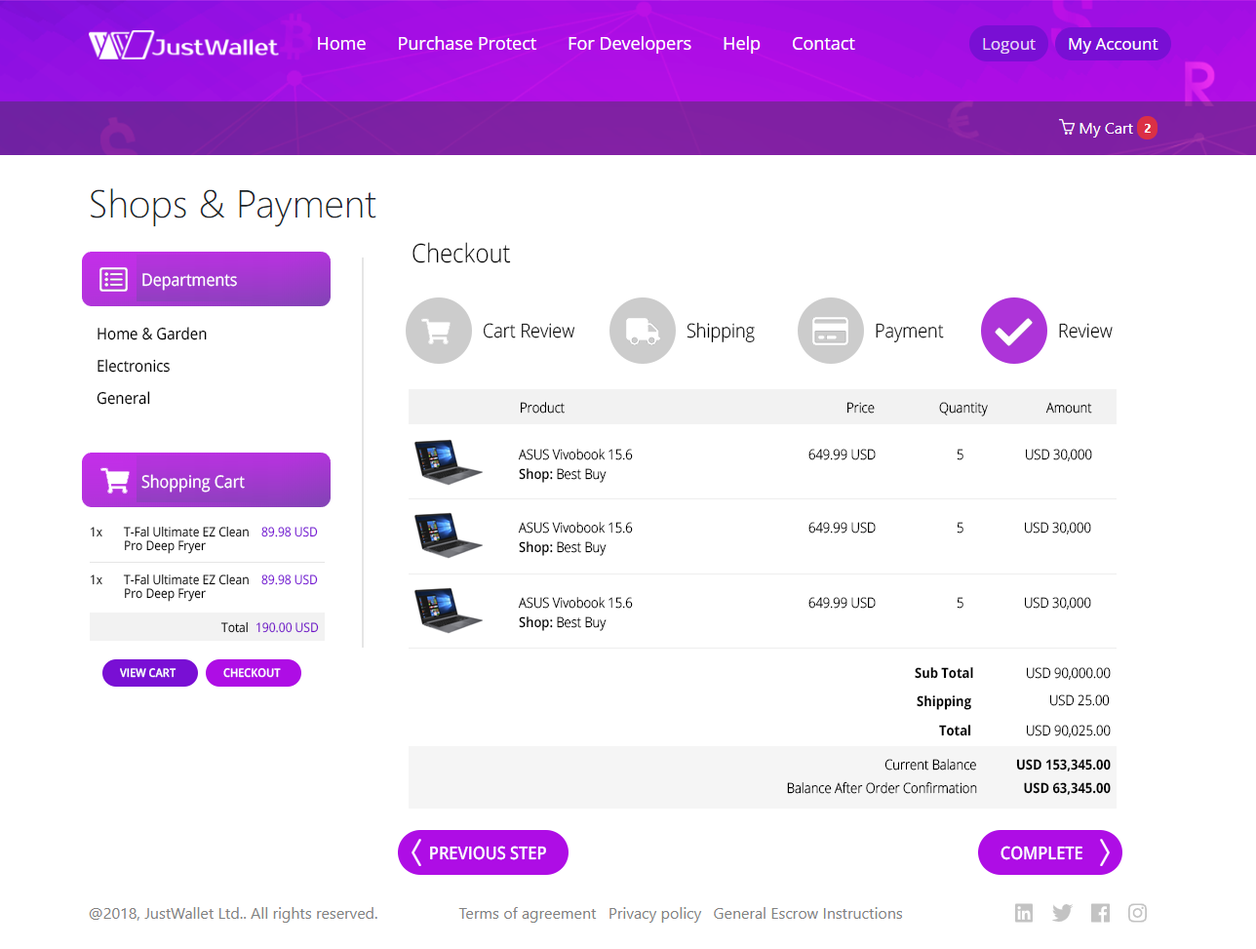
<style>
.page{position:relative;width:1256px;height:949px;background:#ffffff}
.page>*{position:absolute;margin:0}
.t1{font:25.8px "OpenSans-Light";color:#000000;scale:0.91 1}
.t2{font:17.2px "OpenSans";color:#ffffff;scale:0.91 1}
.t3{font:16.1px/32.2px "OpenSans";color:#000000;scale:0.91 1}
.t4{font:19.3px "OpenSans-Light";color:#000000;scale:0.91 1}
.t5{font:13.9px "OpenSans-Light";color:#000000;scale:0.91 1}
.t6{font:13.9px "OpenSans-Semibold";color:#000000;scale:0.91 1}
.t7{font:12.9px "OpenSans";scale:0.91 1}
.t8{font:12.9px "OpenSans";color:#000000;scale:0.91 1}
.t9{font:12.9px "OpenSans";color:#790fd4;scale:0.91 1}
.t10{font:12.9px "OpenSans";color:#730ec9;scale:0.91 1}
.t11{font:11.8px "OpenSans-Semibold";color:#ffffff;text-transform:uppercase;scale:0.91 1}
.t12{font:13.9px "OpenSans-Bold";color:#000000;scale:0.91 1}
.t13{font:13.9px/23.4px "OpenSans-Light";color:#000000;scale:0.91 1}
.t14{font:13.9px/23.4px "OpenSans-Bold";color:#000000;scale:0.91 1}
.t15{font:17.7px "OpenSans-Semibold";color:#ffffff;text-transform:uppercase;scale:0.9 1}
</style>
<div class="page">
<p class="t1" style="left:413px;top:242px;width:98px;height:21px">Checkout</p>
<p class="t2" style="left:142px;top:273px;width:95px;height:18px">Departments</p>
<p class="t3" style="left:97px;top:327px;width:110px;height:78px">Home &amp; Garden<br>Electronics<br>General</p>
<p class="t4" style="left:484px;top:323px;width:92px;height:15px">Cart Review</p>
<p class="t4" style="left:687px;top:322px;width:68px;height:20px">Shipping</p>
<p class="t4" style="left:876px;top:323px;width:68px;height:19px">Payment</p>
<p class="t4" style="left:1059px;top:323px;width:54px;height:15px">Review</p>
<p class="t5" style="left:521px;top:402px;width:44px;height:12px">Product</p>
<p class="t5" style="left:848px;top:402px;width:27px;height:12px">Price</p>
<p class="t5" style="left:939px;top:402px;width:49px;height:15px">Quantity</p>
<p class="t5" style="left:1046px;top:402px;width:46px;height:12px">Amount</p>
<p class="t5" style="left:518px;top:449px;width:115px;height:11px">ASUS Vivobook 15.6</p>
<p class="t5" style="left:809px;top:449px;width:67px;height:11px">649.99 USD</p>
<p class="t5" style="left:957px;top:449px;width:7px;height:11px">5</p>
<p class="t5" style="left:1026px;top:449px;width:66px;height:12px">USD 30,000</p>
<p class="t5" style="left:519px;top:468px;width:88px;height:15px"><span class="t6">Shop: </span>Best Buy</p>
<p class="t2" style="left:141px;top:474px;width:104px;height:19px">Shopping Cart</p>
<p class="t5" style="left:518px;top:522px;width:115px;height:12px">ASUS Vivobook 15.6</p>
<p class="t5" style="left:809px;top:522px;width:67px;height:12px">649.99 USD</p>
<p class="t5" style="left:957px;top:522px;width:7px;height:12px">5</p>
<p class="t5" style="left:1025px;top:522px;width:67px;height:13px">USD 30,000</p>
<p class="t7" style="left:91px;top:527px;width:11px;height:10px">1x</p>
<p class="t8" style="left:123px;top:526px;width:126px;height:28px">T-Fal Ultimate EZ Clean <br>Pro Deep Fryer</p>
<p class="t9" style="left:261px;top:527px;width:57px;height:10px">89.98 USD</p>
<p class="t5" style="left:519px;top:541px;width:88px;height:15px"><span class="t6">Shop: </span>Best Buy</p>
<p class="t7" style="left:91px;top:575px;width:11px;height:10px">1x</p>
<p class="t8" style="left:123px;top:574px;width:126px;height:28px">T-Fal Ultimate EZ Clean <br>Pro Deep Fryer</p>
<p class="t9" style="left:261px;top:575px;width:57px;height:10px">89.98 USD</p>
<p class="t5" style="left:518px;top:597px;width:115px;height:12px">ASUS Vivobook 15.6</p>
<p class="t5" style="left:809px;top:597px;width:67px;height:12px">649.99 USD</p>
<p class="t5" style="left:957px;top:597px;width:7px;height:12px">5</p>
<p class="t5" style="left:1025px;top:597px;width:67px;height:13px">USD 30,000</p>
<p class="t5" style="left:519px;top:616px;width:88px;height:15px"><span class="t6">Shop: </span>Best Buy</p>
<p class="t8" style="left:220px;top:621px;width:28px;height:12px">Total</p>
<p class="t10" style="left:257px;top:622px;width:62px;height:11px">190.00 USD</p>
<p class="t11" style="left:120px;top:668px;width:57px;height:10px">View Cart</p>
<p class="t11" style="left:223px;top:668px;width:58px;height:10px">CHECKOUT</p>
<p class="t12" style="left:915px;top:667px;width:58px;height:12px">Sub Total</p>
<p class="t5" style="left:1027px;top:667px;width:84px;height:13px">USD 90,000.00</p>
<p class="t12" style="left:917px;top:695px;width:55px;height:15px">Shipping</p>
<p class="t5" style="left:1051px;top:695px;width:59px;height:11px">USD 25.00</p>
<p class="t12" style="left:939px;top:725px;width:33px;height:11px">Total</p>
<p class="t5" style="left:1027px;top:725px;width:84px;height:12px">USD 90,025.00</p>
<p class="t13" style="left:787px;top:759px;width:324px;height:36px;text-align:right">Current Balance            <span class="t14">USD 153,345.00<br></span>Balance After Order Confirmation              <span class="t14">USD 63,345.00</span></p>
<p class="t15" style="left:430px;top:846px;width:116px;height:14px">Previous Step</p>
<p class="t15" style="left:1001px;top:846px;width:82px;height:14px">Complete</p>
</div>
